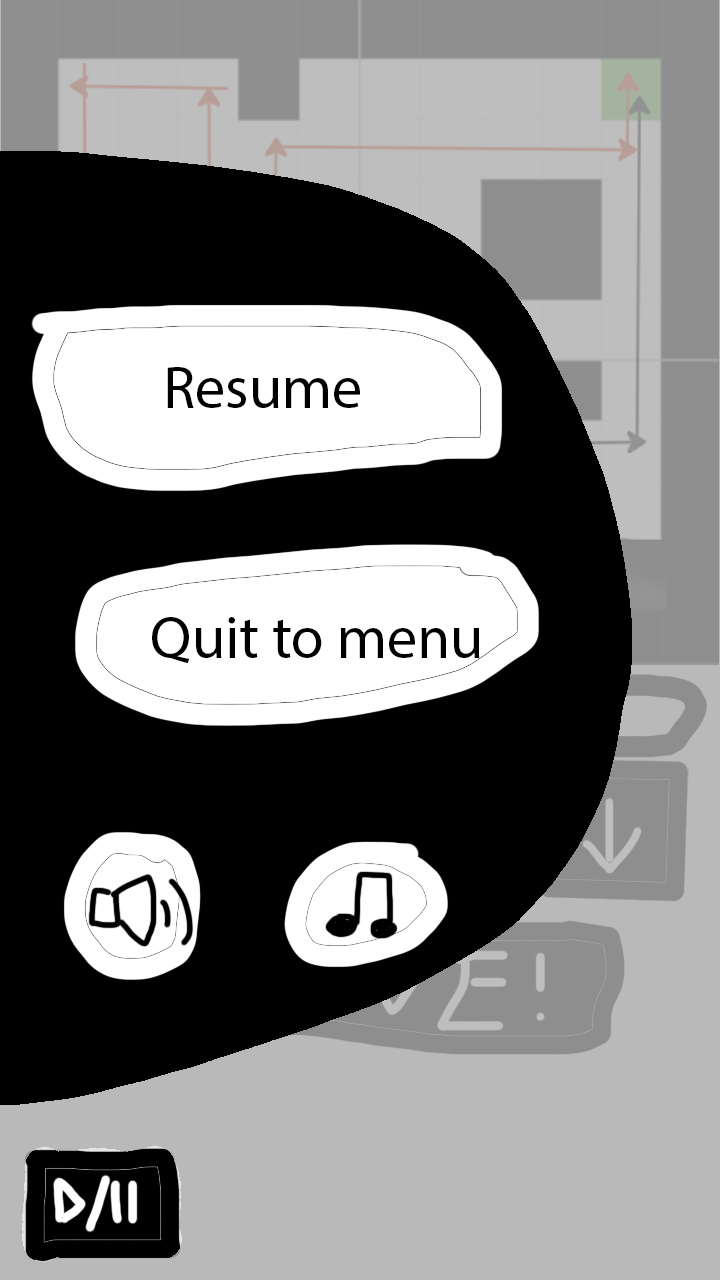
<style>
.page{position:relative;width:720px;height:1280px;background:#000000}
.page>*{position:absolute;margin:0}
.t1{font:60px "MyriadPro-Regular";color:#000000}
</style>
<div class="page">
<p class="t1" style="left:167px;top:367px;width:193px;height:41px">Resume</p>
<p class="t1" style="left:152px;top:617px;width:328px;height:47px">Quit to menu</p>
</div>
